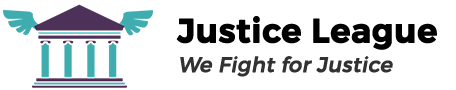
<style>
.page{position:relative;width:456px;height:90px;background:#ffffff}
.page>*{position:absolute;margin:0}
.t1{font:33.3px "Montserrat-SemiBold";color:#000000;font-weight:bold}
.t2{font:33.3px "Montserrat-SemiBold";color:#000000;text-transform:uppercase;font-weight:bold}
.t3{font:20.8px "Montserrat-Regular";color:#323232;font-weight:bold;font-style:italic}
</style>
<div class="page">
<p class="t1" style="left:176px;top:16px;width:261px;height:34px"><span class="t2">J</span>ustice League</p>
<p class="t3" style="left:180px;top:56px;width:213px;height:21px">We Fight for Justice</p>
</div>
